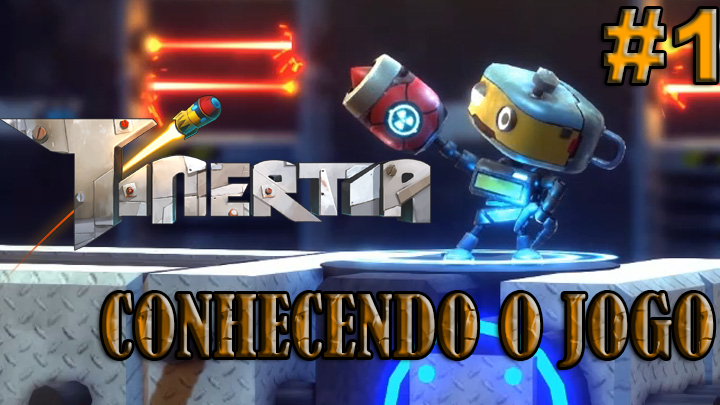
<style>
.page{position:relative;width:720px;height:405px}
.page>*{position:absolute;margin:0}
.t1{font:100px "Arial-Black"}
.t2{font:80px "BernardMT-Condensed"}
</style>
<div class="page">
<p class="t1" style="left:604px;top:9px;width:113px;height:74px">#1</p>
<p class="t2" style="left:102px;top:293px;width:612px;height:74px">CONHECENDO O JOGO</p>
</div>
